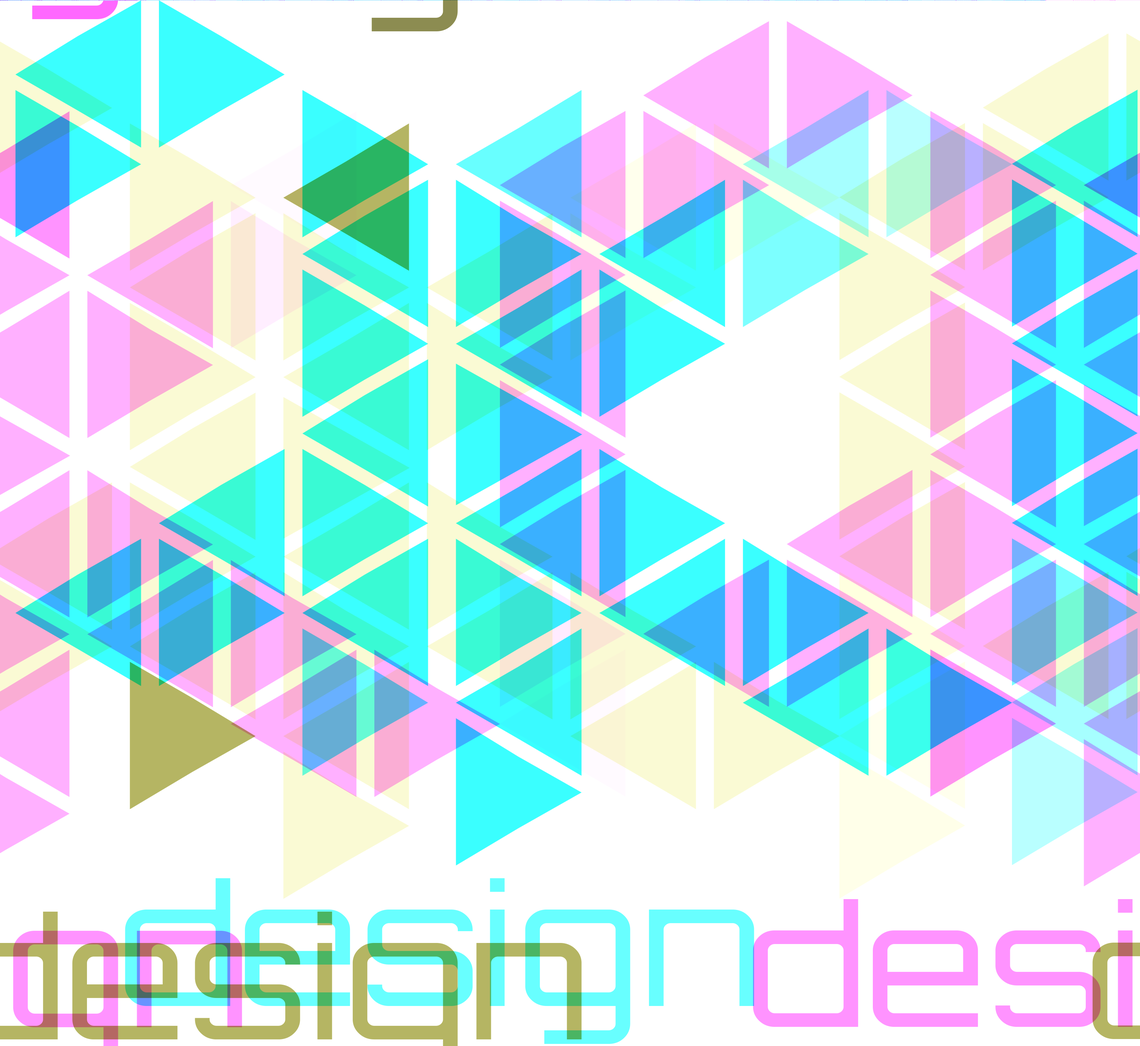
<style>
.page{position:relative;width:1140px;height:1046px;background:#ffffff}
.page>*{position:absolute;margin:0}
.t1{font:165.9px "Orbitron-Regular";scale:1.07 1}
</style>
<div class="page">
<p class="t1" style="left:253px;top:878px;width:629px;height:165px">design</p>
</div>
